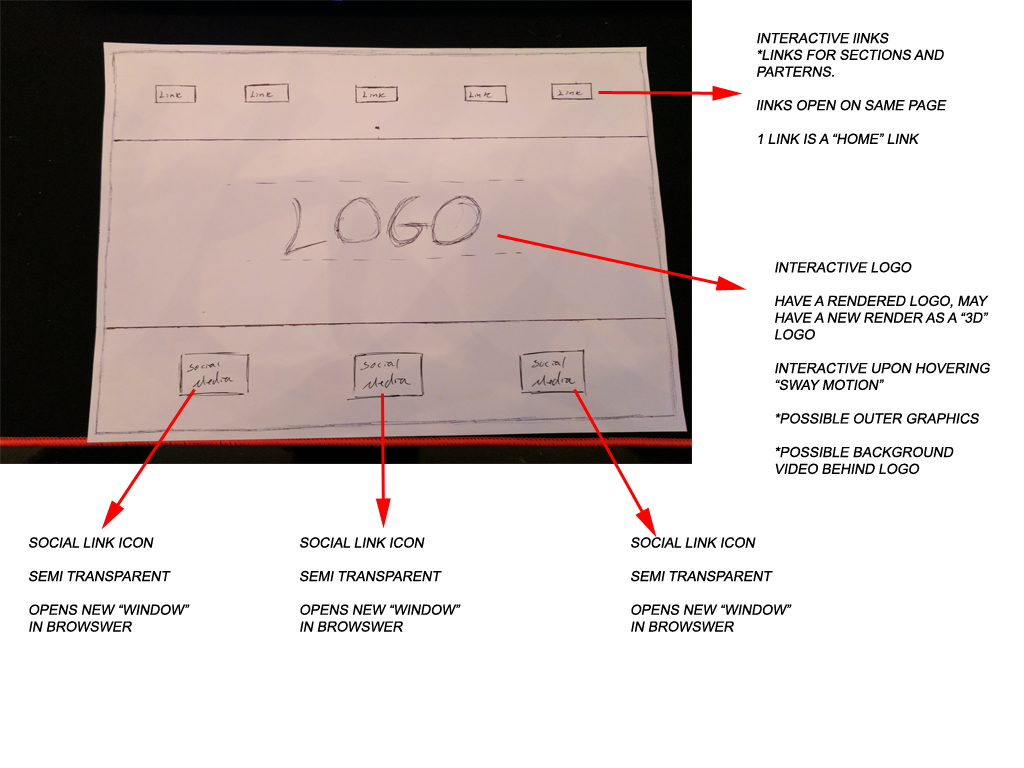
<style>
.page{position:relative;width:1024px;height:768px;background:#ffffff}
.page>*{position:absolute;margin:0}
.t1{font:14px "ArialMT";color:#000000;font-style:italic}
</style>
<div class="page">
<p class="t1" style="left:756px;top:32px;width:191px;height:112px">INTERACTIVE lINKS<br>*LINKS FOR SECTIONS AND PARTERNS.<br><br>lINKS OPEN ON SAME PAGE<br><br>1 LINK IS A “HOME” LINK</p>
<p class="t1" style="left:775px;top:262px;width:215px;height:213px">INTERACTIVE LOGO<br><br>HAVE A RENDERED LOGO, MAY HAVE A NEW RENDER AS A “3D” LOGO<br><br>INTERACTIVE UPON HOVERING<br>“SWAY MOTION”<br><br>*POSSIBLE OUTER GRAPHICS<br><br>*POSSIBLE BACKGROUND VIDEO BEHIND LOGO</p>
<p class="t1" style="left:29px;top:537px;width:161px;height:95px">SOCIAL LINK ICON<br><br>SEMI TRANSPARENT <br><br>OPENS NEW “WINDOW” IN BROWSWER</p>
<p class="t1" style="left:300px;top:537px;width:161px;height:95px">SOCIAL LINK ICON<br><br>SEMI TRANSPARENT <br><br>OPENS NEW “WINDOW” IN BROWSWER</p>
<p class="t1" style="left:631px;top:537px;width:161px;height:95px">SOCIAL LINK ICON<br><br>SEMI TRANSPARENT <br><br>OPENS NEW “WINDOW” IN BROWSWER</p>
</div>
